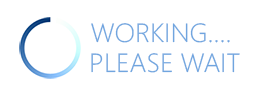
<style>
.page{position:relative;width:264px;height:100px;background:#ffffff}
.page>*{position:absolute;margin:0}
.t1{font:26.2px "SegoeUI-Light";color:#70a5df}
</style>
<div class="page">
<p class="t1" style="left:91px;top:23px;width:139px;height:20px">WORKING....</p>
<p class="t1" style="left:91px;top:53px;width:149px;height:20px">PLEASE WAIT</p>
</div>
